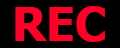
<style>
.page{position:relative;width:120px;height:48px;background:#000000}
.page>*{position:absolute;margin:0}
.t1{font:46.7px "Tahoma-Bold";color:#ff0029}
</style>
<div class="page">
<p class="t1" style="left:15px;top:6px;width:90px;height:36px">REC</p>
</div>
